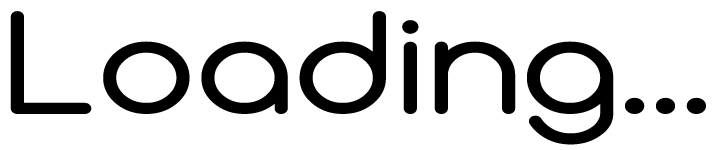
<style>
.page{position:relative;width:713px;height:150px;background:#ffffff}
.page>*{position:absolute;margin:0}
.t1{font:130.4px "Comfortaa";letter-spacing:-0.025em;color:#000000;font-weight:bold;scale:1.2 1}
</style>
<div class="page">
<p class="t1" style="left:10px;top:11px;width:696px;height:134px">Loading...</p>
</div>
